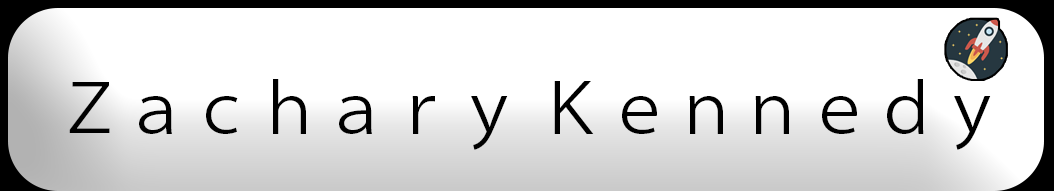
<style>
.page{position:relative;width:1054px;height:191px;background:#ffffff}
.page>*{position:absolute;margin:0}
.t1{font:66.7px "KozGoPr6N-Regular";color:#000000}
</style>
<div class="page">
<p class="t1" style="left:69px;top:79px;width:922px;height:71px">Ｚａｃｈａｒｙ Ｋｅｎｎｅｄｙ</p>
</div>
